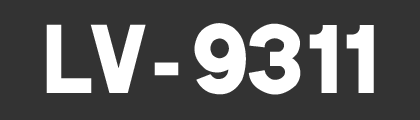
<style>
.page{position:relative;width:420px;height:120px;background:#333333}
.page>*{position:absolute;margin:0}
.t1{font:96px "Ccrige-Regular";color:#ffffff}
</style>
<div class="page">
<p class="t1" style="left:46px;top:23px;width:328px;height:72px">LV-9311</p>
</div>
